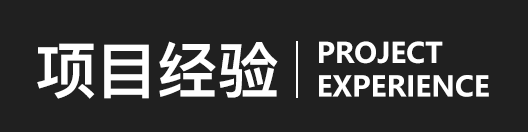
<style>
.page{position:relative;width:528px;height:132px;background:#202020}
.page>*{position:absolute;margin:0}
.t1{font:61px "PingFangSC-Heavy";color:#ffffff}
.t2{font:27.9px "MicrosoftYaHei-Bold";color:#ffffff}
</style>
<div class="page">
<p class="t1" style="left:37px;top:41px;width:241px;height:58px">项目经验</p>
<p class="t2" style="left:319px;top:41px;width:170px;height:56px">PROJECT<br>EXPERIENCE</p>
</div>
